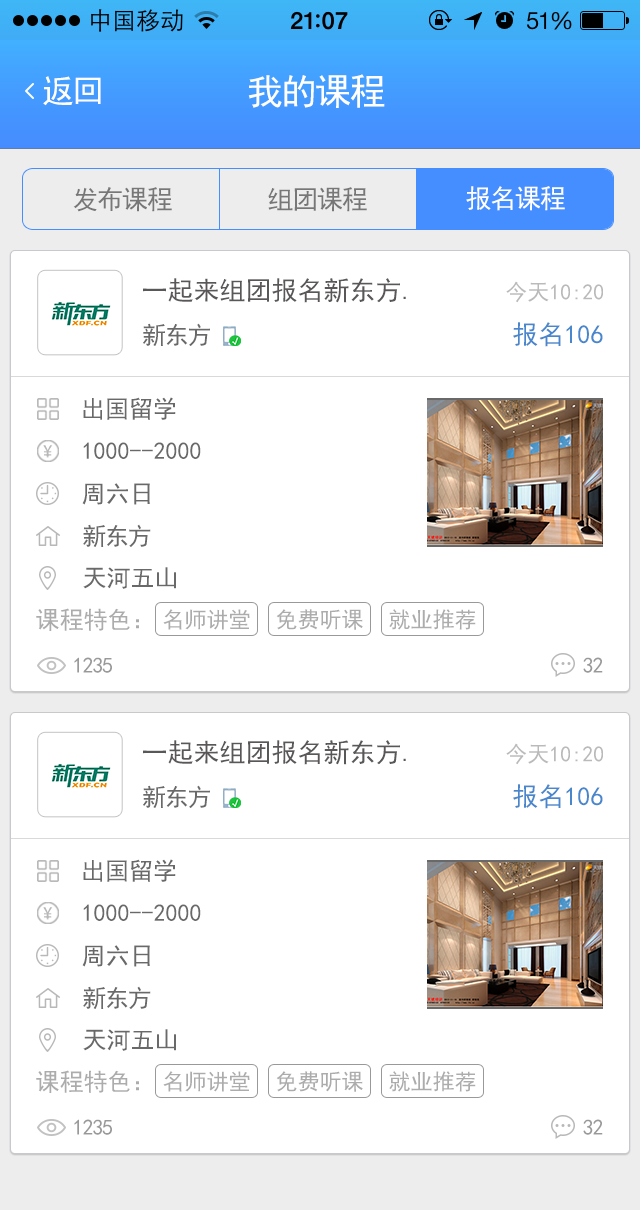
<style>
.page{position:relative;width:640px;height:1210px;background:#ffffff}
.page>*{position:absolute;margin:0}
.t1{font:32px "SimHei";letter-spacing:-0.05em;color:#ffffff}
.t2{font:36px "SimHei";letter-spacing:-0.05em;color:#ffffff}
.t3{font:26px "SimHei";letter-spacing:-0.05em;color:#777777}
.t4{font:26px "SimHei";letter-spacing:-0.05em;color:#ffffff}
.t5{font:26px "SimHei";color:#595757}
.t6{font:22px "SimHei";color:#bababa}
.t7{font:24px "SimHei";letter-spacing:-0.05em;color:#696969}
.t8{font:26px "SimHei";color:#4887cd}
.t9{font:24px "SimHei";color:#696969}
.t10{font:26px "SimHei";letter-spacing:-0.05em;color:#696969}
.t11{font:26px "SimHei";letter-spacing:-0.05em;color:#999999}
.t12{font:24px "SimHei";letter-spacing:-0.05em;color:#999999}
.t13{font:24px "SimHei";color:#acacac}
.t14{font:22px "SimHei";color:#acacac}
.t15{font:22px "SimHei";letter-spacing:-0.05em;color:#999999}
</style>
<div class="page">
<p class="t1" style="left:43px;top:76px;width:58px;height:30px">返回</p>
<p class="t2" style="left:248px;top:74px;width:137px;height:34px">我的课程</p>
<p class="t3" style="left:73px;top:187px;width:99px;height:25px">发布课程</p>
<p class="t3" style="left:268px;top:187px;width:99px;height:25px">组团课程</p>
<p class="t4" style="left:466px;top:186px;width:99px;height:25px">报名课程</p>
<p class="t5" style="left:143px;top:278px;width:263px;height:25px">一起来组团报名新东方.</p>
<p class="t6" style="left:506px;top:281px;width:97px;height:22px">今天10:20</p>
<p class="t7" style="left:143px;top:323px;width:67px;height:23px">新东方</p>
<p class="t8" style="left:513px;top:322px;width:90px;height:25px">报名106</p>
<p class="t9" style="left:83px;top:397px;width:93px;height:23px"><span class="t10">     </span>出国留学</p>
<p class="t9" style="left:83px;top:442px;width:118px;height:17px"><span class="t11">    </span>1000--2000</p>
<p class="t9" style="left:82px;top:483px;width:68px;height:22px"><span class="t12">     </span>周六日</p>
<p class="t7" style="left:83px;top:524px;width:68px;height:23px">新东方</p>
<p class="t9" style="left:83px;top:567px;width:93px;height:22px"><span class="t11">      </span>天河五山</p>
<p class="t13" style="left:36px;top:608px;width:103px;height:23px">课程特色：</p>
<p class="t14" style="left:163px;top:609px;width:87px;height:21px">名师讲堂</p>
<p class="t14" style="left:276px;top:609px;width:87px;height:21px">免费听课</p>
<p class="t14" style="left:389px;top:609px;width:87px;height:21px">就业推荐</p>
<p class="t15" style="left:74px;top:657px;width:38px;height:16px"><span class="t11">     </span>1235</p>
<p class="t15" style="left:583px;top:657px;width:20px;height:16px"><span class="t11">     </span>32</p>
<p class="t5" style="left:143px;top:740px;width:263px;height:25px">一起来组团报名新东方.</p>
<p class="t6" style="left:506px;top:743px;width:97px;height:22px">今天10:20</p>
<p class="t7" style="left:143px;top:785px;width:67px;height:23px">新东方</p>
<p class="t8" style="left:513px;top:784px;width:90px;height:25px">报名106</p>
<p class="t9" style="left:83px;top:859px;width:93px;height:23px"><span class="t10">     </span>出国留学</p>
<p class="t9" style="left:83px;top:904px;width:118px;height:17px"><span class="t11">    </span>1000--2000</p>
<p class="t9" style="left:82px;top:945px;width:68px;height:22px"><span class="t12">     </span>周六日</p>
<p class="t7" style="left:83px;top:986px;width:68px;height:23px">新东方</p>
<p class="t9" style="left:83px;top:1029px;width:93px;height:22px"><span class="t11">      </span>天河五山</p>
<p class="t13" style="left:36px;top:1070px;width:103px;height:23px">课程特色：</p>
<p class="t14" style="left:163px;top:1071px;width:87px;height:21px">名师讲堂</p>
<p class="t14" style="left:276px;top:1071px;width:87px;height:21px">免费听课</p>
<p class="t14" style="left:389px;top:1071px;width:87px;height:21px">就业推荐</p>
<p class="t15" style="left:74px;top:1119px;width:38px;height:16px"><span class="t11">     </span>1235</p>
<p class="t15" style="left:583px;top:1119px;width:20px;height:16px"><span class="t11">     </span>32</p>
</div>
